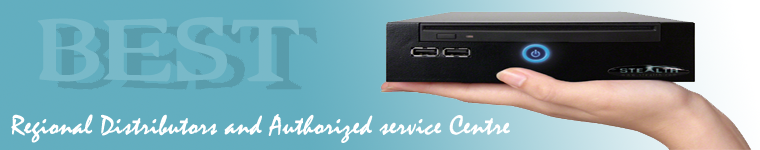
<style>
.page{position:relative;width:760px;height:150px}
.page>*{position:absolute;margin:0}
.t1{font:83.3px "ReadyformyCloseup";color:#79b9c8;font-weight:bold}
.t2{font:27.8px "Mistral";color:#ffffff;font-weight:bold}
</style>
<div class="page">
<p class="t1" style="left:37px;top:17px;width:263px;height:65px">BEST</p>
<p class="t2" style="left:11px;top:114px;width:499px;height:29px">Regional Distributors and Authorized service Centre</p>
</div>
